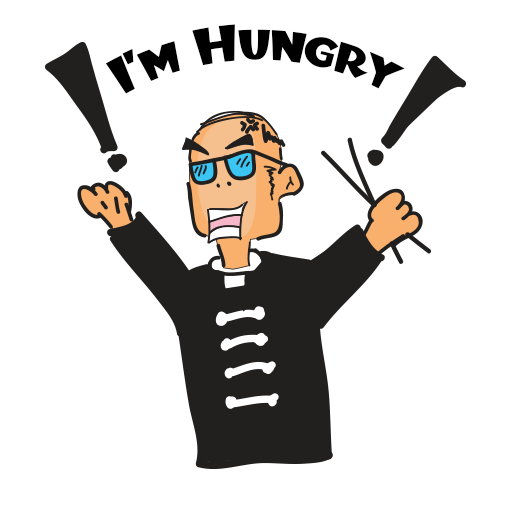
<style>
.page{position:relative;width:512px;height:512px;background:#ffffff}
.page>*{position:absolute;margin:0}
.t1{font:48px "BlitzkriegNF";color:#000000}
</style>
<div class="page">
<p class="t1" style="left:105px;top:24px;width:300px;height:70px">I’m Hungry</p>
</div>
